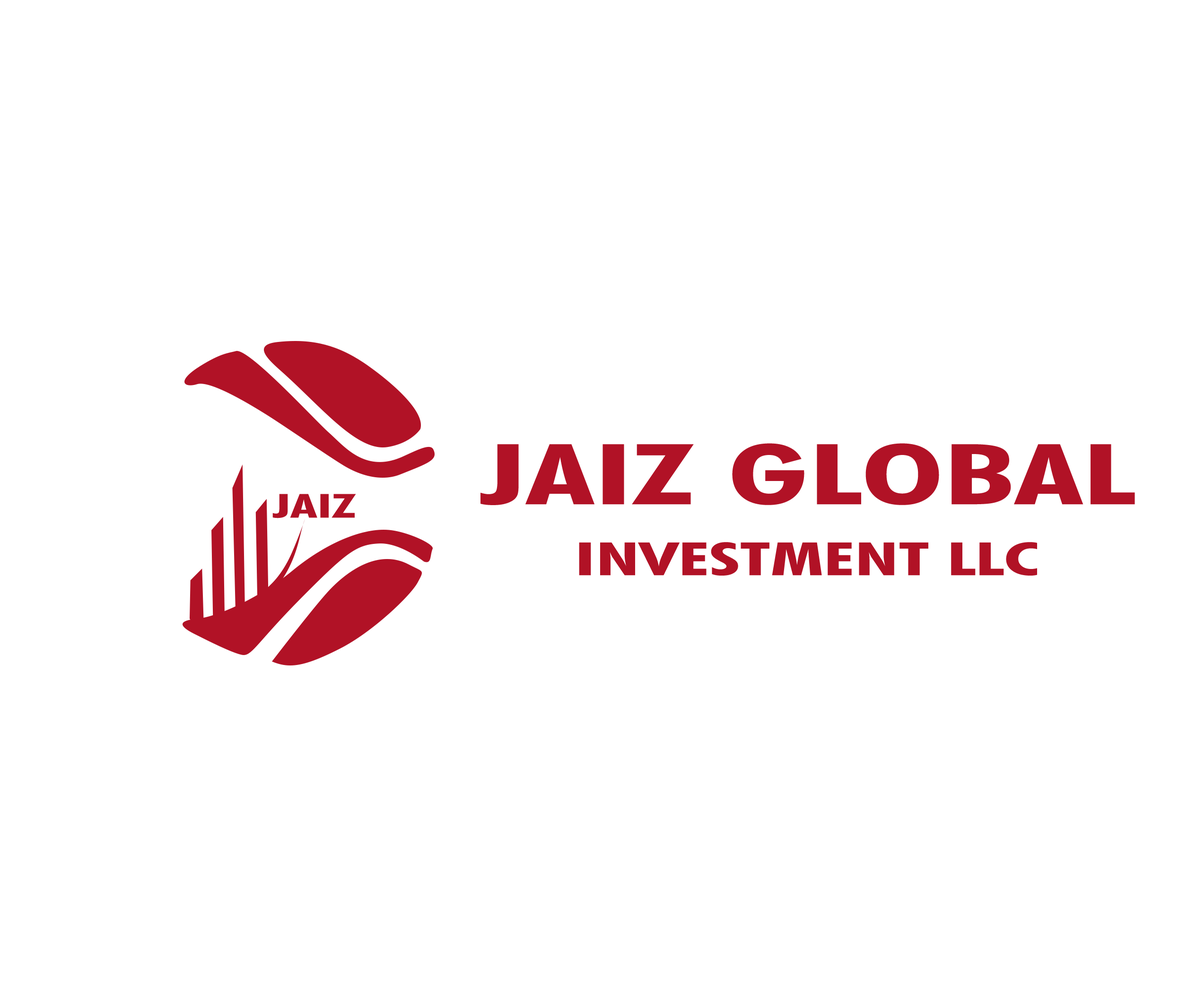
<style>
.page{position:relative;width:1196px;height:997px;background:#ffffff}
.page>*{position:absolute;margin:0}
.t1{font:84.1px "FuturaBT-BoldCondensed";color:#b11226;scale:1.73 1}
.t2{font:33.1px "FuturaBT-BoldCondensed";color:#b11226;scale:1.72 1}
.t3{font:45.7px "FuturaBT-BoldCondensed";color:#b11226;scale:1.73 1}
</style>
<div class="page">
<p class="t1" style="left:481px;top:443px;width:654px;height:62px">JAIZ GLOBAL</p>
<p class="t2" style="left:272px;top:494px;width:84px;height:24px">JAIZ</p>
<p class="t3" style="left:579px;top:542px;width:458px;height:34px">INVESTMENT LLC</p>
</div>
